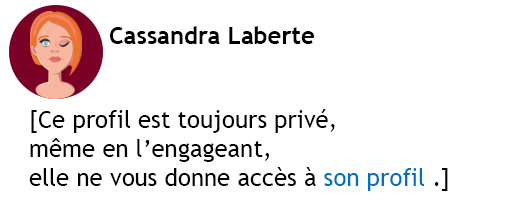
<style>
.page{position:relative;width:512px;height:212px;background:#ffffff}
.page>*{position:absolute;margin:0}
.t1{font:24px "TrebuchetMS-Bold";color:#000000}
.t2{font:24px "TrebuchetMS";color:#000000}
.t3{font:24px "TrebuchetMS";color:#0072bc}
</style>
<div class="page">
<p class="t1" style="left:110px;top:26px;width:204px;height:18px">Cassandra Laberte</p>
<p class="t2" style="left:29px;top:109px;width:419px;height:82px">[Ce profil est toujours privé, <br>même en l’engageant,<br>elle ne vous donne accès à <span class="t3">son profil</span> .]</p>
</div>
